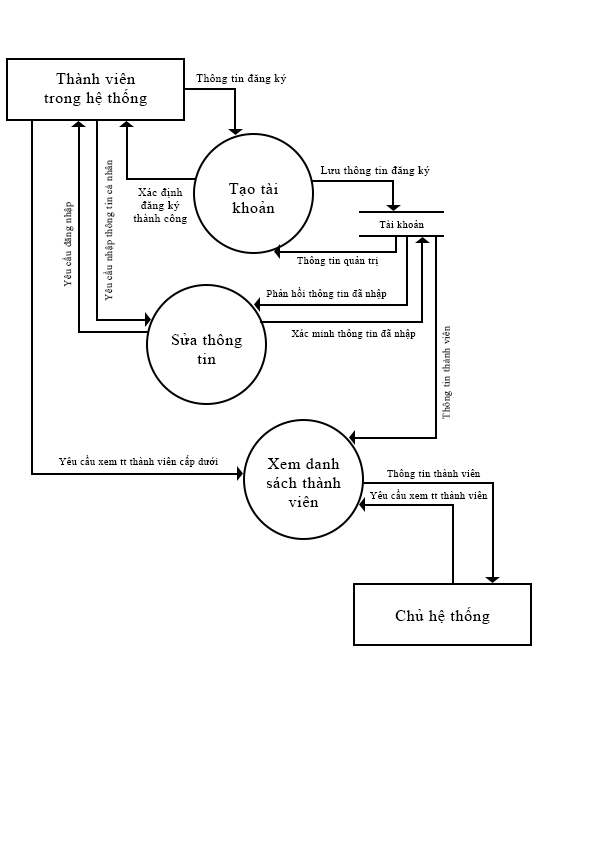
<style>
.page{position:relative;width:595px;height:842px;background:#ffffff}
.page>*{position:absolute;margin:0}
.t1{font:15.9px "TimesNewRomanPSMT";letter-spacing:0.05em;color:#000000}
.t2{font:11px "TimesNewRomanPSMT";letter-spacing:0.05em;color:#000000}
.t3{font:10px "TimesNewRomanPSMT";letter-spacing:0.05em}
.t4{font:10px "TimesNewRomanPSMT";letter-spacing:0.05em;color:#000000}
</style>
<div class="page">
<p class="t1" style="left:44px;top:73px;width:103px;height:33px;text-align:center">Thành viên<br>trong hệ thống</p>
<p class="t2" style="left:196px;top:74px;width:91px;height:10px">Thông tin đăng ký</p>
<p class="t3" style="left:103px;top:160px;width:12px;height:141px;rotate:-90deg">Yêu cầu nhập thông tin cá nhân</p>
<p class="t2" style="left:320px;top:166px;width:110px;height:10px">Lưu thông tin đăng ký</p>
<p class="t1" style="left:229px;top:183px;width:49px;height:30px;text-align:center">Tạo tài<br>khoản</p>
<p class="t2" style="left:133px;top:188px;width:54px;height:36px;text-align:center">Xác định<br>đăng ký<br>thành công</p>
<p class="t3" style="left:62px;top:202px;width:12px;height:85px;rotate:-90deg">Yêu cầu đăng nhập</p>
<p class="t4" style="left:379px;top:220px;width:45px;height:8px">Tài khoản</p>
<p class="t4" style="left:297px;top:256px;width:81px;height:10px">Thông tin quản trị</p>
<p class="t4" style="left:266px;top:287px;width:121px;height:12px">Phản hồi thông tin đã nhập</p>
<p class="t4" style="left:291px;top:329px;width:125px;height:10px">Xác minh thông tin đã nhập</p>
<p class="t3" style="left:442px;top:326px;width:10px;height:93px;rotate:-90deg">Thông tin thành viên</p>
<p class="t1" style="left:171px;top:333px;width:71px;height:31px;text-align:center">Sửa thông<br>tin</p>
<p class="t4" style="left:59px;top:455px;width:159px;height:12px">Yêu cầu xem tt thành viên cấp dưới</p>
<p class="t1" style="left:266px;top:458px;width:75px;height:49px;text-align:center">Xem danh<br>sách thành<br>viên</p>
<p class="t4" style="left:387px;top:469px;width:94px;height:10px">Thông tin thành viên</p>
<p class="t4" style="left:370px;top:489px;width:118px;height:10px">Yêu cầu xem tt thành viên</p>
<p class="t1" style="left:395px;top:607px;width:95px;height:17px">Chủ hệ thống</p>
</div>
